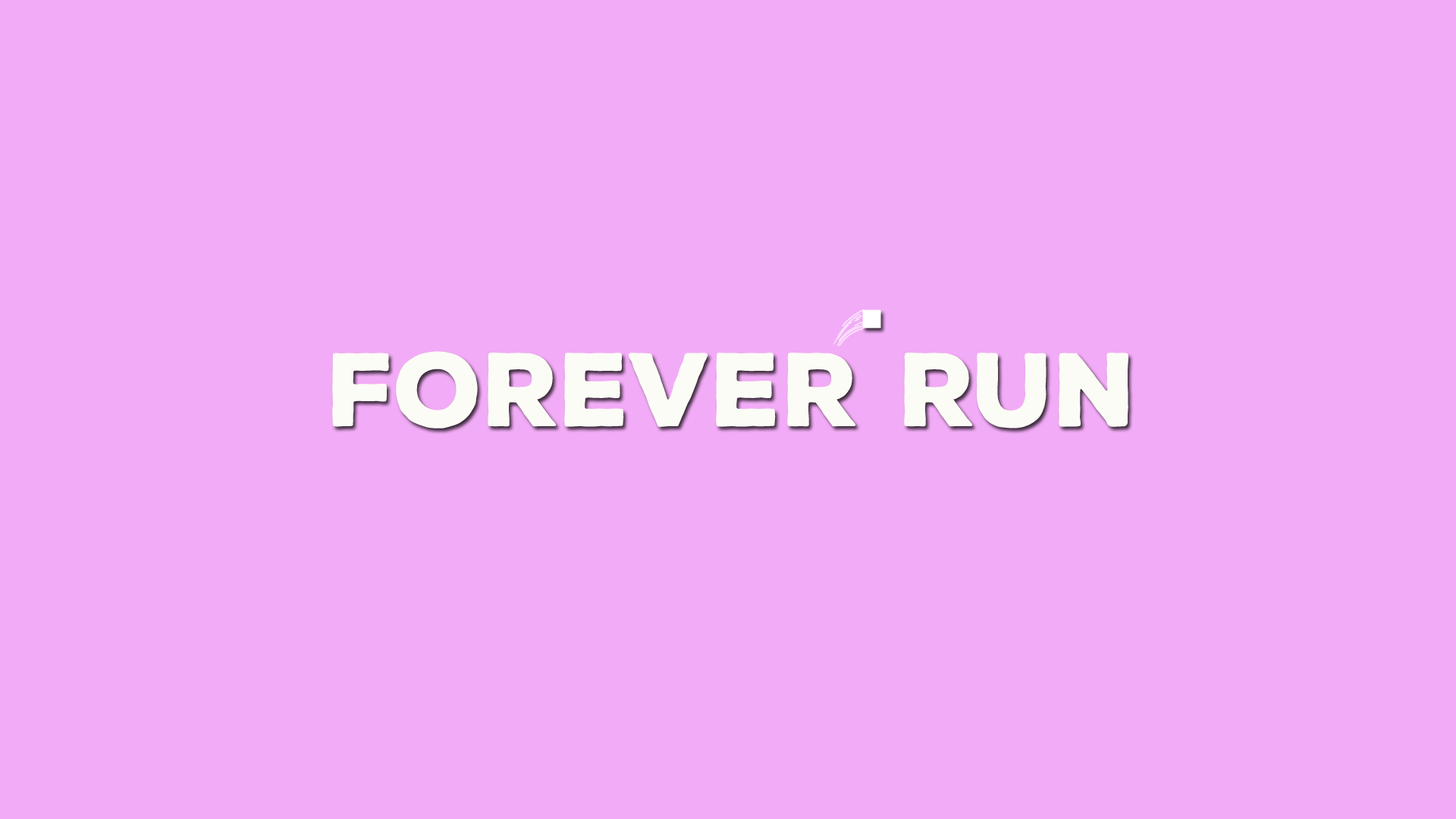
<style>
.page{position:relative;width:1456px;height:819px;background:#f2abf6}
.page>*{position:absolute;margin:0}
.t1{font:101.1px "NexaRustSans-Black";color:#fcfcf6}
</style>
<div class="page">
<p class="t1" style="left:332px;top:351px;width:796px;height:77px">Forever Run</p>
</div>
